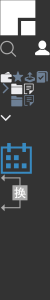
<style>
.page{position:relative;width:50px;height:300px;background:#333333}
.page>*{position:absolute;margin:0}
.t1{font:12px "SimHei";color:#ffffff}
</style>
<div class="page">
<p class="t1" style="left:14px;top:187px;width:12px;height:12px">换</p>
</div>
